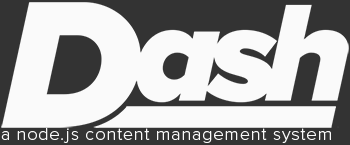
<style>
.page{position:relative;width:350px;height:145px;background:#fafafa}
.page>*{position:absolute;margin:0}
.t1{font:18px "ProximaNova-Light";letter-spacing:0.05em;color:#fafafa}
</style>
<div class="page">
<p class="t1" style="left:1px;top:128px;width:330px;height:15px">a node.js content management system</p>
</div>
